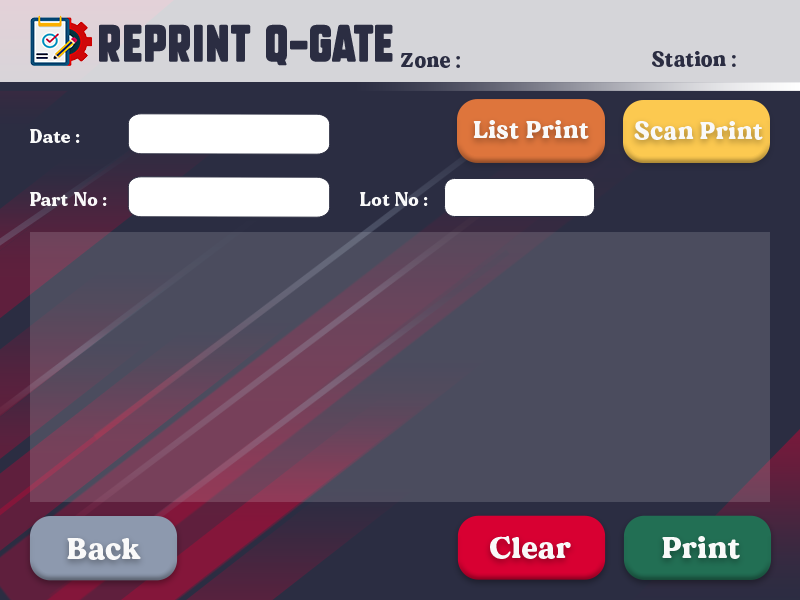
<style>
.page{position:relative;width:800px;height:600px;background:#4b4c5e}
.page>*{position:absolute;margin:0}
.t1{font:36px "SubtleCurves";letter-spacing:0.025em;color:#2b2d42}
.t2{font:20px "MADEDillan";letter-spacing:0.025em;color:#2b2d42}
.t3{font:24px "MADEDillan";letter-spacing:0.025em;color:#f9f9f9}
.t4{font:18px "MADEDillan";letter-spacing:0.025em;color:#f9f9f9}
.t5{font:30px "MADEDillan";letter-spacing:0.025em;color:#f9f9f9}
</style>
<div class="page">
<p class="t1" style="left:99px;top:24px;width:294px;height:42px">Reprint q-gate</p>
<p class="t2" style="left:401px;top:53px;width:59px;height:15px">Zone :</p>
<p class="t2" style="left:652px;top:51px;width:84px;height:16px">Station :</p>
<p class="t3" style="left:473px;top:120px;width:116px;height:19px">List Print</p>
<p class="t3" style="left:634px;top:121px;width:129px;height:19px">Scan Print</p>
<p class="t4" style="left:30px;top:129px;width:50px;height:14px">Date :</p>
<p class="t4" style="left:30px;top:192px;width:77px;height:14px">Part No :</p>
<p class="t4" style="left:360px;top:192px;width:68px;height:14px">Lot No :</p>
<p class="t5" style="left:67px;top:538px;width:74px;height:22px">Back</p>
<p class="t5" style="left:490px;top:536px;width:81px;height:23px">Clear</p>
<p class="t5" style="left:662px;top:536px;width:78px;height:23px">Print</p>
</div>
